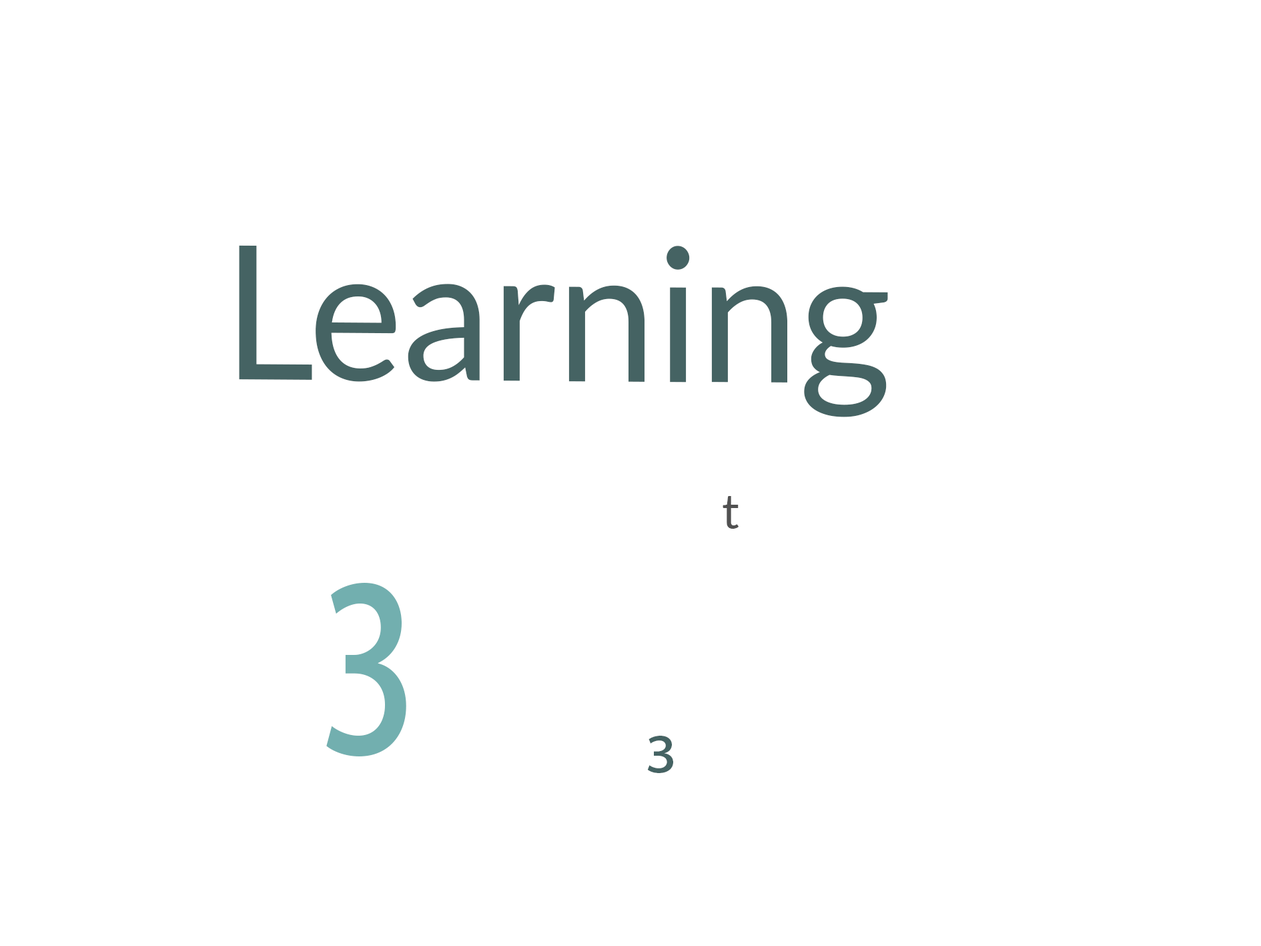
<style>
.page{position:relative;width:1261px;height:946px;background:#ffffff}
.page>*{position:absolute;margin:0}
.t1{font:186.5px "Lato-Regular";color:#456363;scale:0.96 1}
.t2{font:48px "Lato-Regular";color:#515151}
.t3{font:222.6px "AdobeHeitiStd-Regular";color:#72afaf;scale:0.8 1}
.t4{font:48px "AdobeHeitiStd-Regular";color:#456363}
</style>
<div class="page">
<p class="t1" style="left:239px;top:245px;width:649px;height:172px">Learning</p>
<p class="t2" style="left:723px;top:496px;width:16px;height:32px">t</p>
<p class="t3" style="left:326px;top:583px;width:80px;height:173px">3</p>
<p class="t4" style="left:647px;top:735px;width:26px;height:38px">3</p>
</div>
